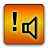
<style>
.page{position:relative;width:48px;height:48px}
.page>*{position:absolute;margin:0}
.t1{font:26px "Arial-BoldMT";color:#000000}
</style>
<div class="page">
<p class="t1" style="left:12px;top:12px;width:5px;height:19px">!</p>
</div>
